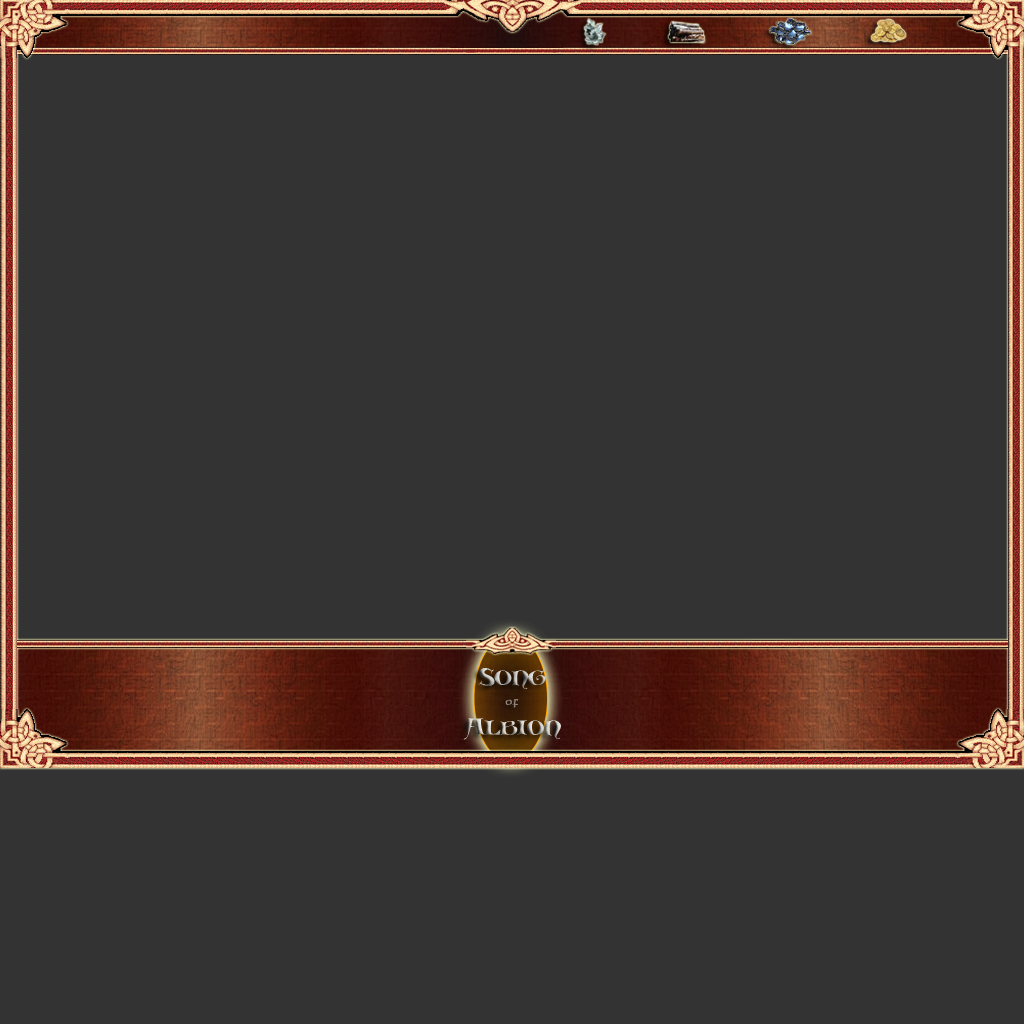
<style>
.page{position:relative;width:1024px;height:1024px;background:#333333}
.page>*{position:absolute;margin:0}
.t1{font:24px "Scribish"}
</style>
<div class="page">
<p class="t1" style="left:478px;top:668px;width:68px;height:21px">Song</p>
<p class="t1" style="left:463px;top:718px;width:98px;height:22px">Albion</p>
</div>
